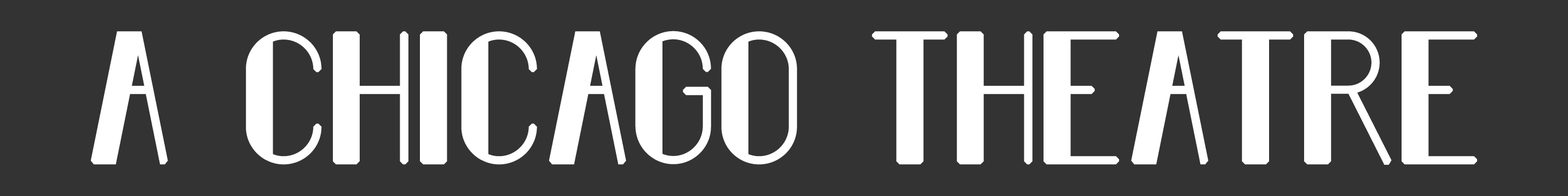
<style>
.page{position:relative;width:1568px;height:196px;background:#333333}
.page>*{position:absolute;margin:0}
.t1{font:229.9px "FiftyFive";letter-spacing:-0.01em;color:#ffffff;font-weight:bold}
</style>
<div class="page">
<p class="t1" style="left:90px;top:31px;width:1387px;height:134px">A    CHICAGO    THEATRE</p>
</div>
